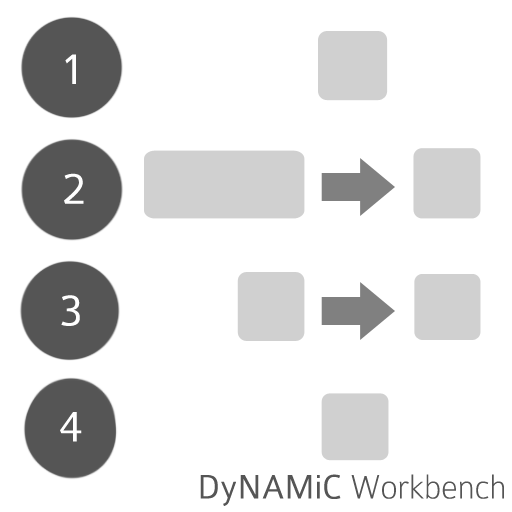
<style>
.page{position:relative;width:512px;height:512px;background:#ffffff}
.page>*{position:absolute;margin:0}
.t1{font:48px "Colaborate-Light";color:#ffffff}
.t2{font:36px "Colaborate-Thin";color:#555555}
.t3{font:36px "Colaborate-Light";color:#555555}
</style>
<div class="page">
<p class="t1" style="left:65px;top:54px;width:11px;height:30px">1</p>
<p class="t1" style="left:64px;top:173px;width:20px;height:31px">2</p>
<p class="t1" style="left:61px;top:295px;width:19px;height:31px">3</p>
<p class="t1" style="left:60px;top:412px;width:22px;height:30px">4</p>
<p class="t2" style="left:200px;top:474px;width:304px;height:32px"><span class="t3">DyNAMiC </span>Workbench</p>
</div>
